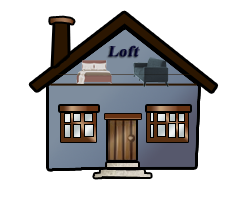
<style>
.page{position:relative;width:240px;height:201px;background:#ffffff}
.page>*{position:absolute;margin:0}
.t1{font:14.9px "TimesNewRomanPS-BoldMT";color:#02032d;font-weight:bold;font-style:italic;scale:1.08 1}
</style>
<div class="page">
<p class="t1" style="left:108px;top:45px;width:32px;height:12px">Loft</p>
</div>
